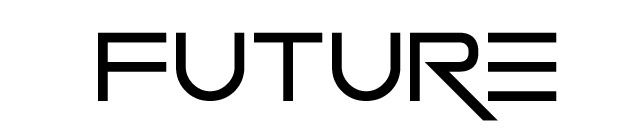
<style>
.page{position:relative;width:640px;height:137px;background:#ffffff}
.page>*{position:absolute;margin:0}
.t1{font:100px "VerminVibes2";color:#000000}
</style>
<div class="page">
<p class="t1" style="left:98px;top:32px;width:459px;height:89px">FUTURE</p>
</div>
